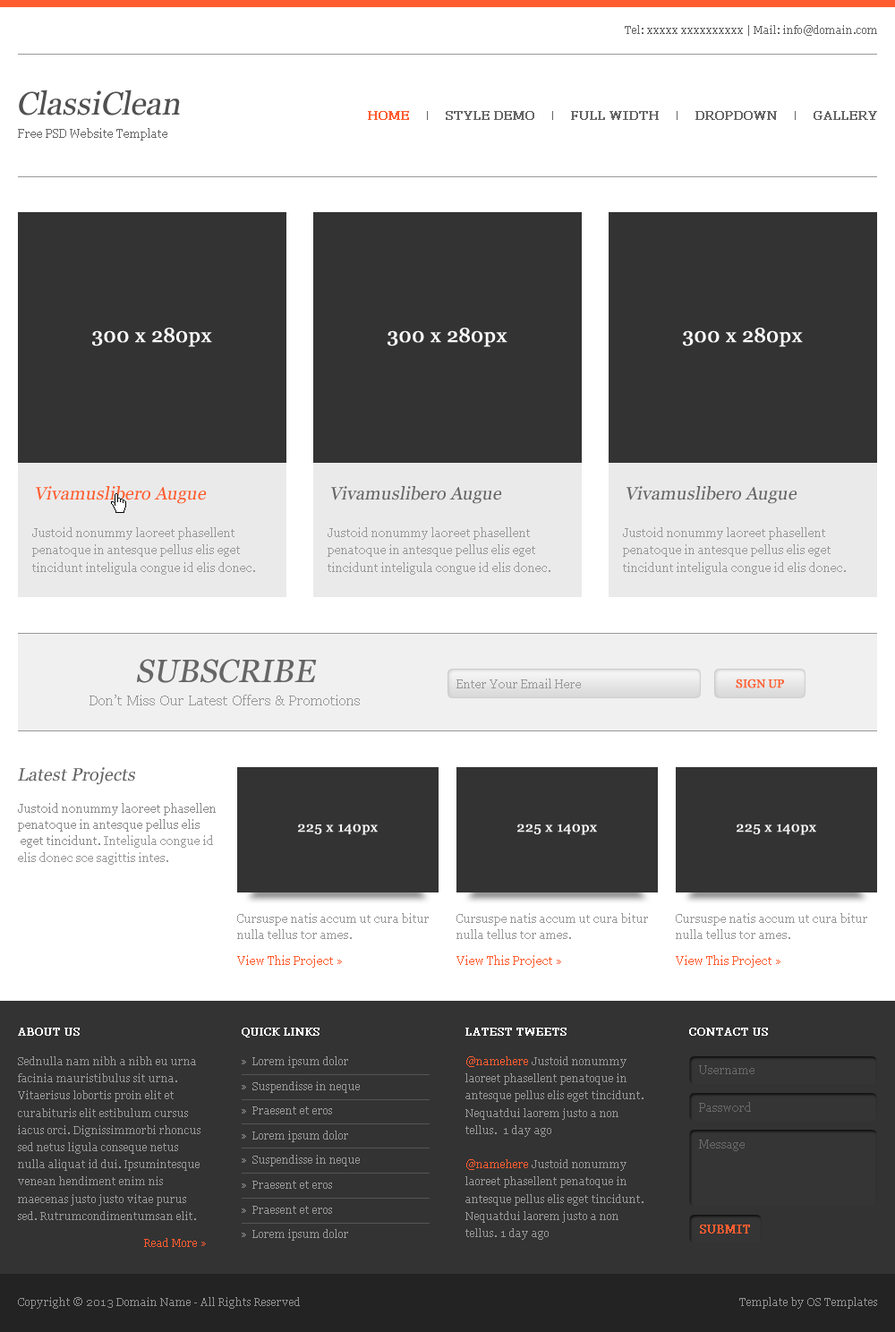
<style>
.page{position:relative;width:895px;height:1332px;background:#333333}
.page>*{position:absolute;margin:0}
.t1{font:10.7px "Georgia";color:#666666}
.t2{font:32.2px "Georgia";color:#505050;font-style:italic}
.t3{font:12.5px "Georgia";color:#ff5d30;font-weight:bold}
.t4{font:12.5px "Georgia";color:#666666;font-weight:bold}
.t5{font:11.6px "Georgia";color:#666666}
.t6{font:20.2px "Georgia";color:#f8f8f8;font-weight:bold}
.t7{font:17.9px "Georgia";color:#ff5d30;font-style:italic}
.t8{font:17.9px "Georgia";color:#666666;font-style:italic}
.t9{font:11.6px/17.5px "Georgia";color:#999999}
.t10{font:32.2px "Georgia";color:#666666;font-style:italic}
.t11{font:11.6px "Georgia";color:#989898}
.t12{font:11.6px "Georgia";color:#ff5d30;text-transform:uppercase;font-weight:bold}
.t13{font:14.3px "Georgia";color:#989898}
.t14{font:11.6px/16.3px "Georgia";color:#8b8b8b}
.t15{font:11.6px/16.3px "Georgia";color:#989898}
.t16{font:14px "Georgia";color:#f8f8f8;font-weight:bold}
.t17{font:11.6px "Georgia";color:#ff5d30}
.t18{font:10.7px "Georgia";color:#ffffff;font-weight:bold}
.t19{font:10.7px/17.2px "Georgia";color:#989898}
.t20{font:10.7px/24.7px "Georgia";color:#989898}
.t21{font:10.7px/17.2px "Georgia";color:#ff5d30}
.t22{font:11.6px "Georgia";color:#696969}
.t23{font:11.6px "Georgia";color:#ff5d30;font-weight:bold}
.t24{font:10.7px "Georgia";color:#ff5d30}
.t25{font:10.7px "Georgia";color:#919191}
</style>
<div class="page">
<p class="t1" style="left:625px;top:25px;width:252px;height:11px">Tel: xxxxx xxxxxxxxxx | Mail: info@domain.com</p>
<p class="t2" style="left:19px;top:90px;width:161px;height:25px">ClassiClean</p>
<p class="t3" style="left:368px;top:111px;width:41px;height:9px">HOME</p>
<p class="t4" style="left:446px;top:111px;width:88px;height:9px">STYLE DEMO</p>
<p class="t4" style="left:571px;top:111px;width:88px;height:9px">FULL WIDTH</p>
<p class="t4" style="left:696px;top:111px;width:81px;height:9px">DROPDOWN</p>
<p class="t4" style="left:814px;top:111px;width:63px;height:9px">GALLERY</p>
<p class="t5" style="left:18px;top:128px;width:149px;height:13px">Free PSD Website Template</p>
<p class="t6" style="left:92px;top:328px;width:120px;height:19px">300 x 280px</p>
<p class="t6" style="left:388px;top:328px;width:120px;height:19px">300 x 280px</p>
<p class="t6" style="left:683px;top:328px;width:120px;height:19px">300 x 280px</p>
<p class="t7" style="left:36px;top:486px;width:171px;height:18px">Vivamuslibero Augue</p>
<p class="t8" style="left:331px;top:486px;width:171px;height:18px">Vivamuslibero Augue</p>
<p class="t8" style="left:627px;top:486px;width:171px;height:18px">Vivamuslibero Augue</p>
<p class="t9" style="left:32px;top:527px;width:223px;height:48px">Justoid nonummy laoreet phasellent penatoque in antesque pellus elis eget tincidunt inteligula congue id elis donec.</p>
<p class="t9" style="left:328px;top:527px;width:223px;height:48px">Justoid nonummy laoreet phasellent penatoque in antesque pellus elis eget tincidunt inteligula congue id elis donec.</p>
<p class="t9" style="left:623px;top:527px;width:223px;height:48px">Justoid nonummy laoreet phasellent penatoque in antesque pellus elis eget tincidunt inteligula congue id elis donec.</p>
<p class="t10" style="left:137px;top:659px;width:180px;height:24px">SUBSCRIBE</p>
<p class="t11" style="left:457px;top:679px;width:124px;height:9px">Enter Your Email Here</p>
<p class="t12" style="left:736px;top:679px;width:48px;height:9px">SIGN UP</p>
<p class="t13" style="left:90px;top:695px;width:270px;height:10px">Don’t Miss Our Latest Offers &amp; Promotions</p>
<p class="t8" style="left:18px;top:767px;width:117px;height:18px">Latest Projects</p>
<p class="t14" style="left:18px;top:803px;width:198px;height:62px">Justoid nonummy laoreet phasellen<br>penatoque in antesque pellus elis<br> eget tincidunt. <span class="t15">Inteligula congue id <br>elis donec sce sagittis intes.</span></p>
<p class="t16" style="left:298px;top:824px;width:80px;height:11px">225 x 140px</p>
<p class="t16" style="left:517px;top:824px;width:80px;height:11px">225 x 140px</p>
<p class="t16" style="left:737px;top:824px;width:79px;height:11px">225 x 140px</p>
<p class="t15" style="left:237px;top:913px;width:192px;height:26px">Cursuspe natis accum ut cura bitur nulla tellus tor ames.</p>
<p class="t15" style="left:457px;top:913px;width:191px;height:26px">Cursuspe natis accum ut cura bitur nulla tellus tor ames.</p>
<p class="t15" style="left:676px;top:913px;width:191px;height:26px">Cursuspe natis accum ut cura bitur nulla tellus tor ames.</p>
<p class="t17" style="left:237px;top:955px;width:105px;height:13px">View This Project »</p>
<p class="t17" style="left:457px;top:955px;width:104px;height:13px">View This Project »</p>
<p class="t17" style="left:676px;top:955px;width:105px;height:13px">View This Project »</p>
<p class="t18" style="left:18px;top:1028px;width:62px;height:8px">ABOUT US</p>
<p class="t18" style="left:242px;top:1028px;width:78px;height:10px">QUICK LINKS</p>
<p class="t18" style="left:465px;top:1028px;width:102px;height:8px">LATEST TWEETS</p>
<p class="t18" style="left:689px;top:1028px;width:79px;height:8px">CONTACT US</p>
<p class="t19" style="left:18px;top:1056px;width:183px;height:164px">Sednulla nam nibh a nibh eu urna facinia mauristibulus sit urna. Vitaerisus lobortis proin elit et curabituris elit estibulum cursus iacus orci. Dignissimmorbi rhoncus sed netus ligula conseque netus nulla aliquat id dui. Ipsumintesque venean hendiment enim nis maecenas justo justo vitae purus sed. Rutrumcondimentumsan elit.</p>
<p class="t20" style="left:242px;top:1056px;width:118px;height:185px">»  Lorem ipsum dolor<br>»  Suspendisse in neque<br>»  Praesent et eros<br>»  Lorem ipsum dolor<br>»  Suspendisse in neque<br>»  Praesent et eros<br>»  Praesent et eros<br>»  Lorem ipsum dolor</p>
<p class="t19" style="left:465px;top:1056px;width:179px;height:184px"><span class="t21">@namehere</span> Justoid nonummy laoreet phasellent penatoque in antesque pellus elis eget tincidunt. Nequatdui laorem justo a non tellus.  1 day ago<br><br><span class="t21">@namehere</span> Justoid nonummy laoreet phasellent penatoque in antesque pellus elis eget tincidunt. Nequatdui laorem justo a non tellus. 1 day ago</p>
<p class="t22" style="left:699px;top:1065px;width:56px;height:9px">Username</p>
<p class="t22" style="left:699px;top:1102px;width:52px;height:10px">Password</p>
<p class="t22" style="left:699px;top:1140px;width:46px;height:11px">Message</p>
<p class="t23" style="left:700px;top:1225px;width:50px;height:9px">SUBMIT</p>
<p class="t24" style="left:144px;top:1238px;width:62px;height:9px">Read More »</p>
<p class="t25" style="left:18px;top:1297px;width:282px;height:12px">Copyright © 2013 Domain Name - All Rights Reserved</p>
<p class="t25" style="left:739px;top:1297px;width:138px;height:12px">Template by OS Templates</p>
</div>
